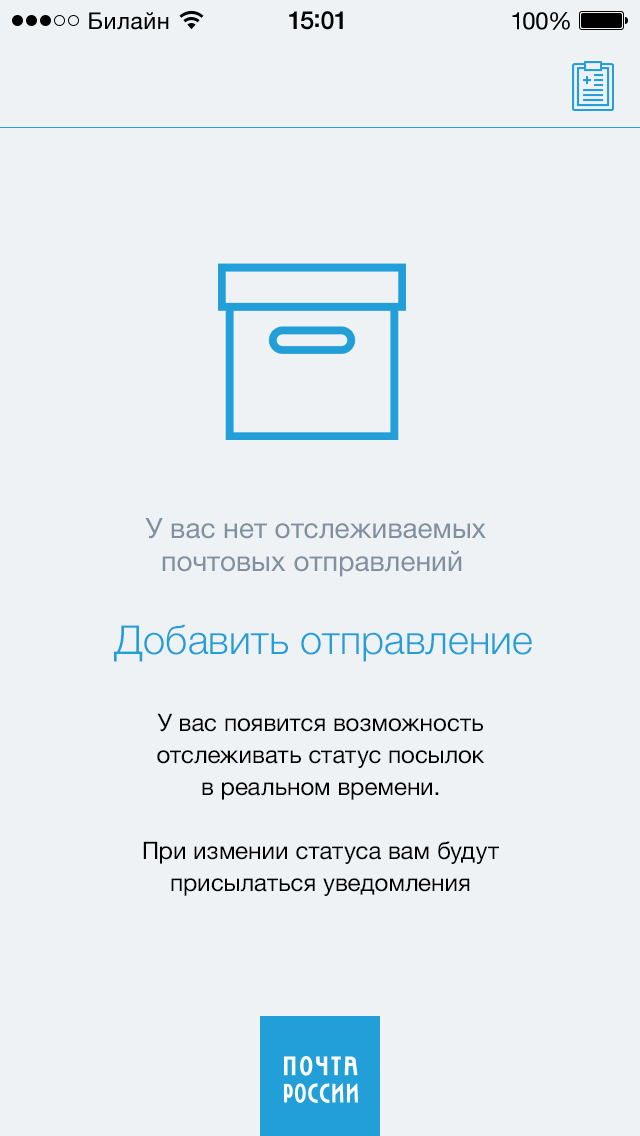
<style>
.page{position:relative;width:640px;height:1136px;background:#eff2f4}
.page>*{position:absolute;margin:0}
.t1{font:28px "HelveticaNeue";color:#8190a0}
.t2{font:40px "HelveticaNeue-Light";color:#229ed8}
.t3{font:24px/32px "HelveticaNeue";color:#000000}
</style>
<div class="page">
<p class="t1" style="left:145px;top:518px;width:341px;height:59px;text-align:center">У вас нет отслеживаемых<br>почтовых отправлений</p>
<p class="t2" style="left:114px;top:624px;width:418px;height:38px">Добавить отправление</p>
<p class="t3" style="left:143px;top:713px;width:356px;height:183px;text-align:center">У вас появится возможность <br>отслеживать статус посылок <br>в реальном времени.<br> <br>При измении статуса вам будут <br>присылаться уведомления</p>
</div>
